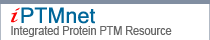
<style>
.page{position:relative;width:210px;height:40px;background:#ffffff}
.page>*{position:absolute;margin:0}
.t1{font:18px "LucidaCalligraphy-Italic";color:#fc0505;font-style:italic;scale:1.2 1}
.t2{font:12px "ArialMT";color:#696969;scale:0.9 1}
</style>
<div class="page">
<p class="t1" style="left:11px;top:7px;width:9px;height:16px">i</p>
<p class="t2" style="left:11px;top:26px;width:161px;height:11px">Integrated Protein PTM Resource</p>
</div>
